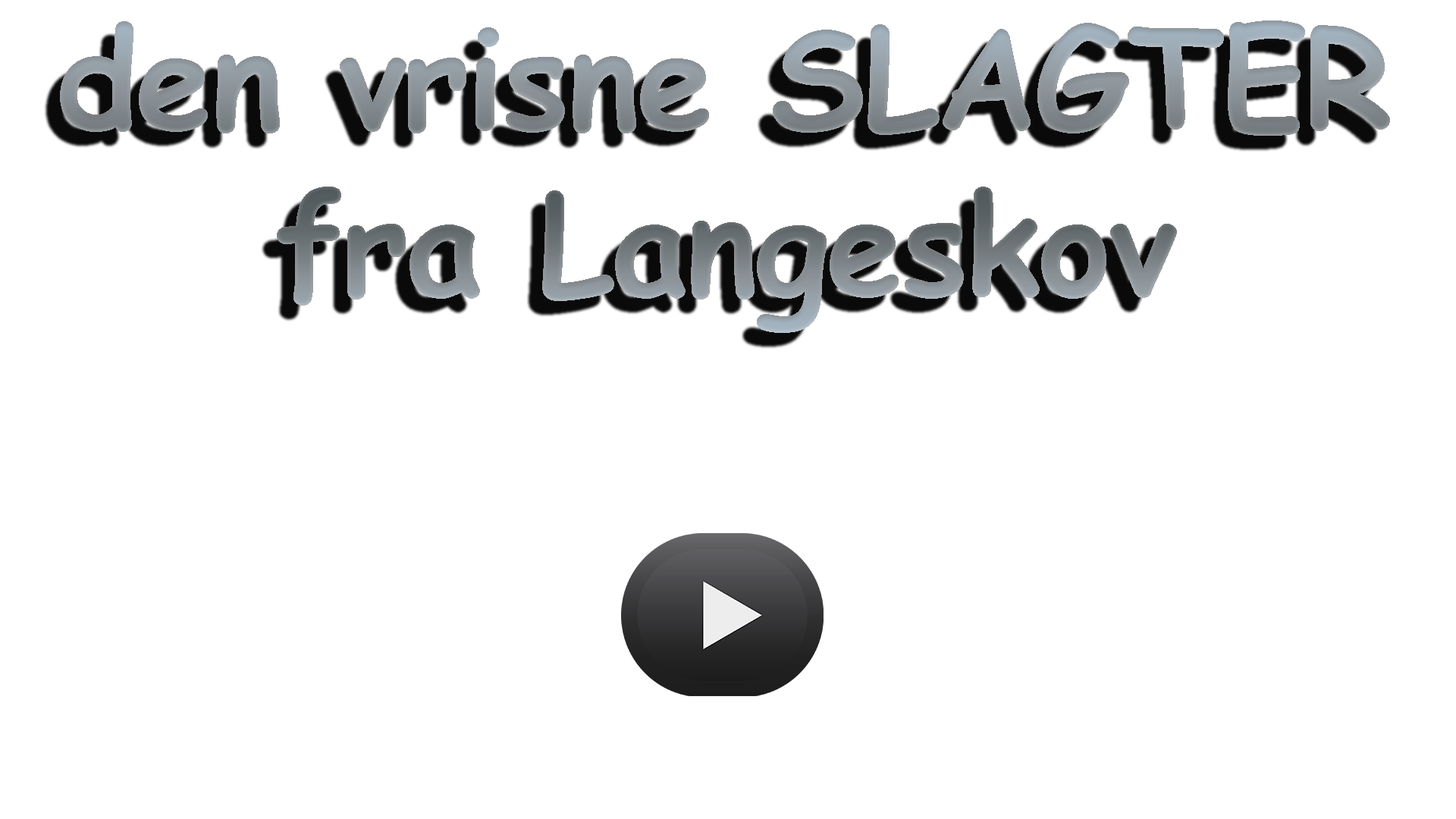
<style>
.page{position:relative;width:1456px;height:819px;background:#ffffff}
.page>*{position:absolute;margin:0}
.t1{font:138.8px "ComicSansMS-Bold";letter-spacing:-0.02em}
</style>
<div class="page">
<p class="t1" style="left:60px;top:20px;width:1330px;height:313px;text-align:center">den vrisne SLAGTER <br>fra Langeskov</p>
</div>
